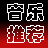
<style>
.page{position:relative;width:48px;height:48px;background:#000000}
.page>*{position:absolute;margin:0}
.t1{font:18.7px "STCaiyun";color:#f5f5f5}
</style>
<div class="page">
<p class="t1" style="left:7px;top:3px;width:37px;height:40px;text-align:center">音乐<br>推荐</p>
</div>
